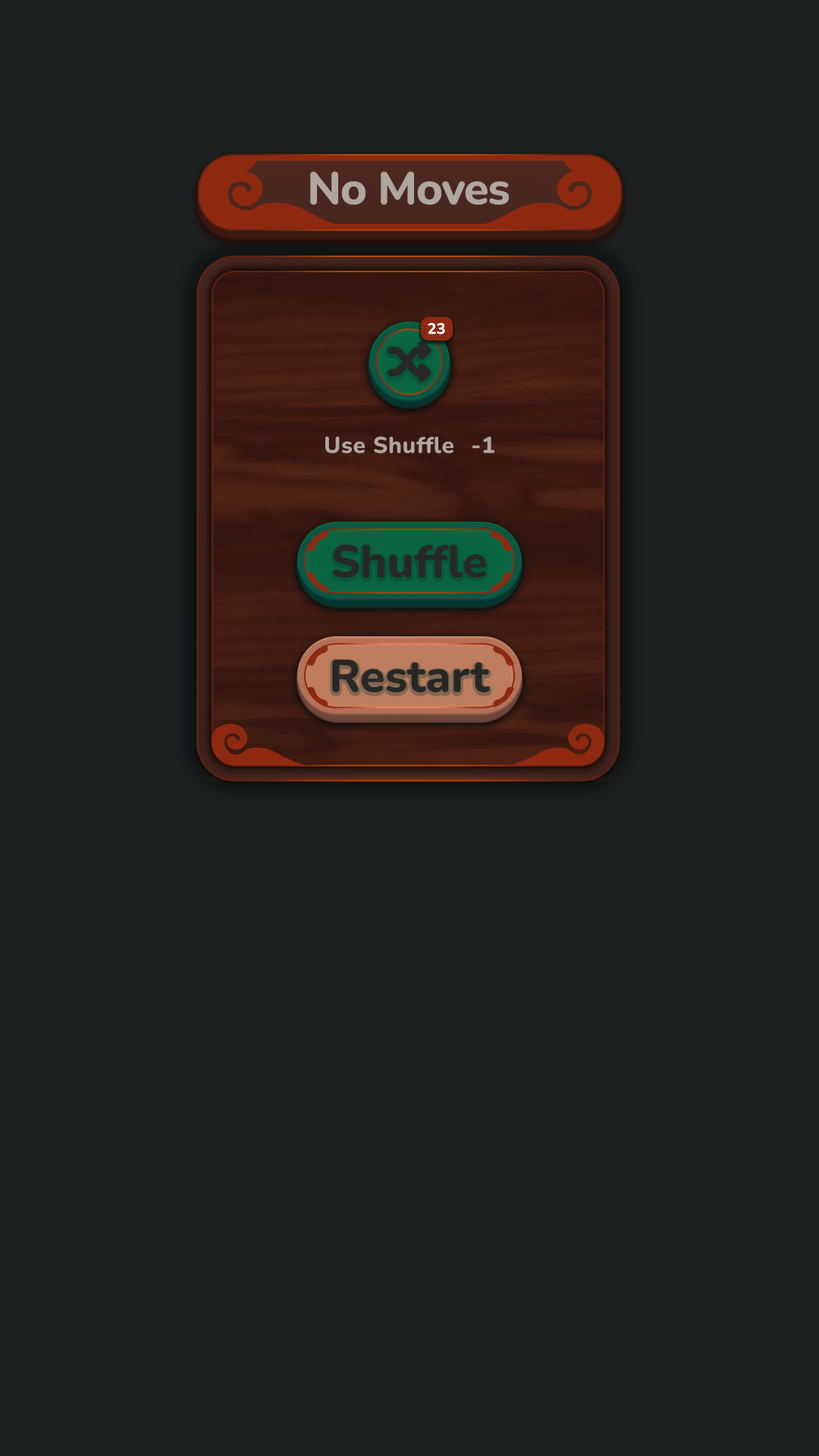
<style>
.page{position:relative;width:819px;height:1456px;background:#1c1f1f}
.page>*{position:absolute;margin:0}
.t1{font:45.5px "Nunito-ExtraBold";letter-spacing:-0.025em;color:#afa6a0}
.t2{font:15.2px "Nunito-ExtraBold";color:#f7f8f1}
.t3{font:22.7px "Nunito-ExtraBold";letter-spacing:0.025em;color:#afa6a0}
.t4{font:45.5px "Nunito-ExtraBold";color:#272825}
</style>
<div class="page">
<p class="t1" style="left:310px;top:171px;width:199px;height:34px">No Moves</p>
<p class="t2" style="left:428px;top:323px;width:17px;height:11px">23</p>
<p class="t3" style="left:325px;top:436px;width:128px;height:17px">Use Shuffle</p>
<p class="t3" style="left:472px;top:436px;width:22px;height:17px">-1</p>
<p class="t4" style="left:333px;top:544px;width:154px;height:34px">Shuffle</p>
<p class="t4" style="left:332px;top:660px;width:158px;height:32px">Restart</p>
</div>
